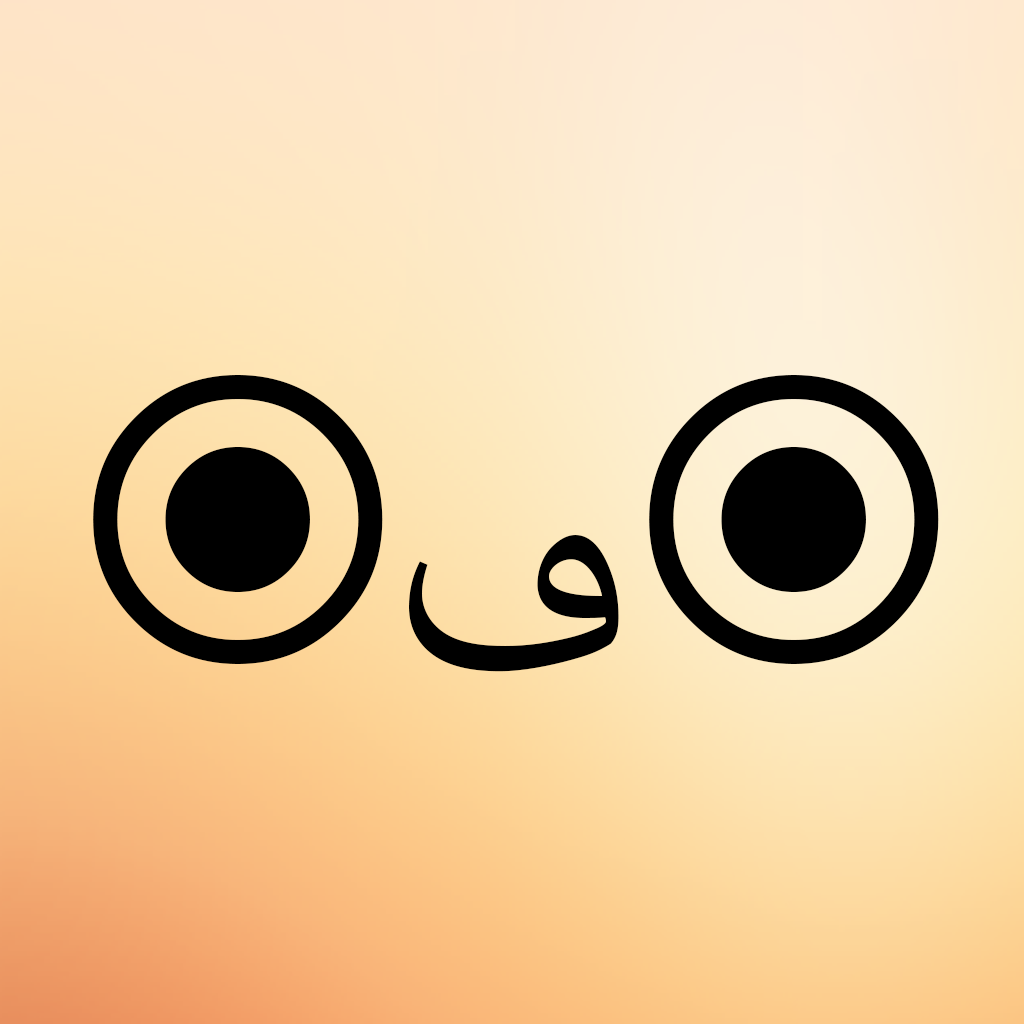
<style>
.page{position:relative;width:1024px;height:1024px}
.page>*{position:absolute;margin:0}
.t1{font:500px "LucidaSansUnicode";color:#000000}
.t2{font:380px "AdobeArabic-Regular";color:#000000}
</style>
<div class="page">
<p class="t1" style="left:93px;top:375px;width:290px;height:289px">◉</p>
<p class="t1" style="left:649px;top:375px;width:290px;height:289px">◉</p>
<p class="t2" style="left:409px;top:535px;width:210px;height:137px">ڡ</p>
</div>
